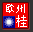
<style>
.page{position:relative;width:33px;height:32px;background:#f20000}
.page>*{position:absolute;margin:0}
.t1{font:10.4px "SimSun";color:#ffffff}
.t2{font:11.7px "SimSun";color:#ffffff}
</style>
<div class="page">
<p class="t1" style="left:6px;top:4px;width:19px;height:9px">欧州</p>
<p class="t2" style="left:16px;top:15px;width:11px;height:12px">桂</p>
</div>
